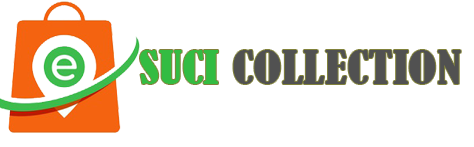
<style>
.page{position:relative;width:474px;height:147px;background:#ffffff}
.page>*{position:absolute;margin:0}
.t1{font:43px "BernardMT-Condensed";color:#515151;scale:1.23 1}
.t2{font:43px "BernardMT-Condensed";color:#33bc42;scale:1.23 1}
</style>
<div class="page">
<p class="t1" style="left:140px;top:50px;width:321px;height:34px"><span class="t2">SUCI</span> COLLECTION</p>
</div>
